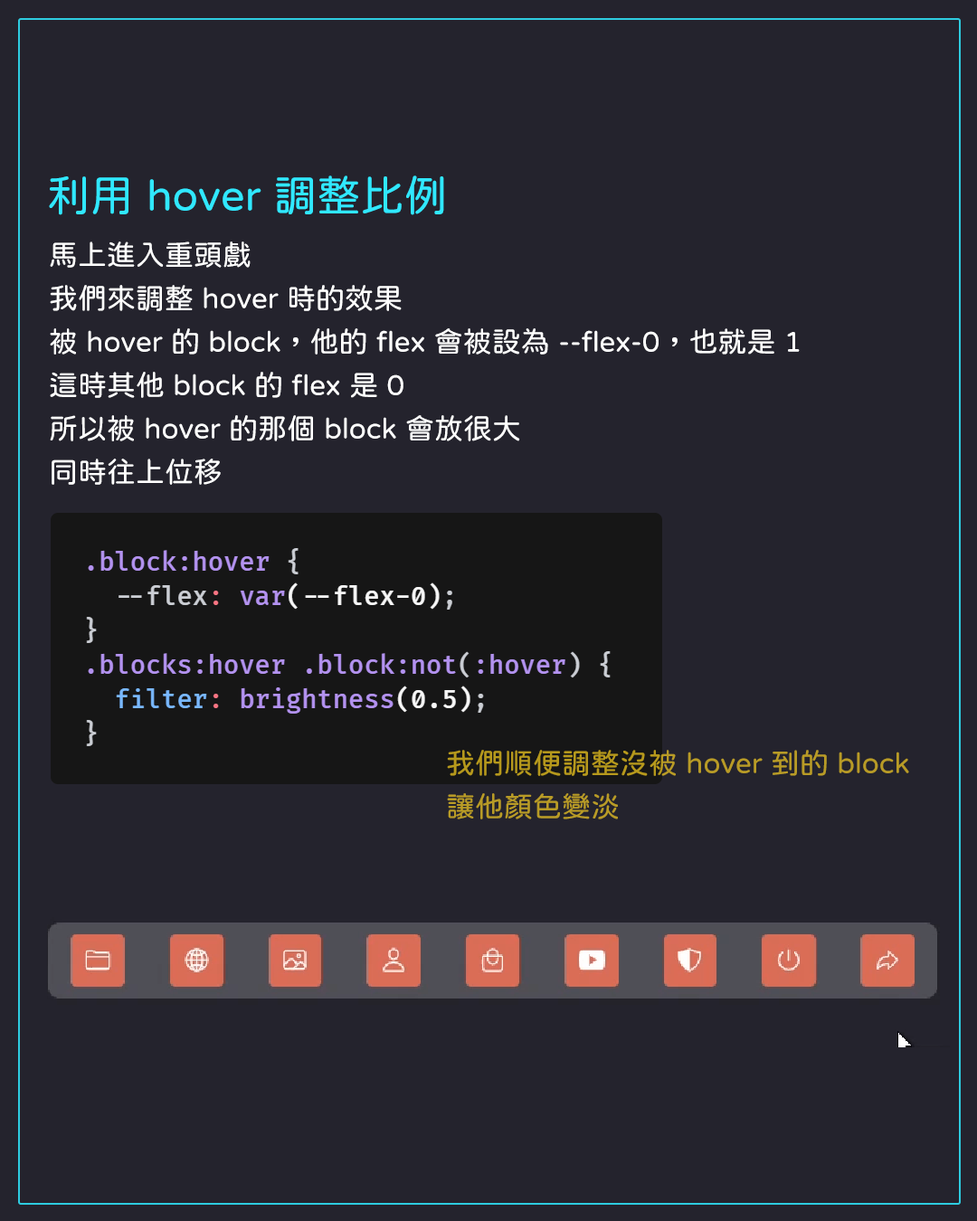
<style>
.page{position:relative;width:977px;height:1221px;background:#24232d}
.page>*{position:absolute;margin:0}
.t1{font:43.4px "jf-openhuninn-1.1";color:#30e8ff}
.t2{font:28.9px/43.4px "jf-openhuninn-1.1";color:#ffffff}
.t3{font:28.9px/43.4px "jf-openhuninn-1.1";color:#b89b26}
</style>
<div class="page">
<p class="t1" style="left:49px;top:175px;width:395px;height:40px">利用 hover 調整比例</p>
<p class="t2" style="left:50px;top:241px;width:749px;height:244px">馬上進入重頭戲<br>我們來調整 hover 時的效果<br>被 hover 的 block，他的 flex 會被設為 --flex-0，也就是 1<br>這時其他 block 的 flex 是 0<br>所以被 hover 的那個 block 會放很大<br>同時往上位移</p>
<p class="t3" style="left:447px;top:750px;width:462px;height:69px">我們順便調整沒被 hover 到的 block<br>讓他顏色變淡</p>
</div>
